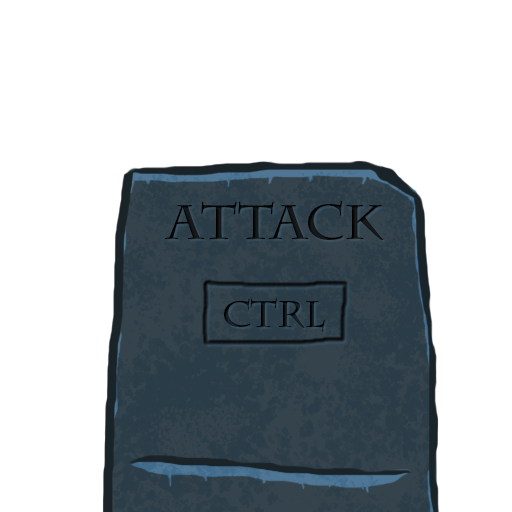
<style>
.page{position:relative;width:512px;height:512px;background:#ffffff}
.page>*{position:absolute;margin:0}
.t1{font:48px "CharlemagneStd-Bold";color:#161819}
.t2{font:36px "CharlemagneStd-Bold";color:#0c1013}
</style>
<div class="page">
<p class="t1" style="left:165px;top:200px;width:219px;height:41px">ATTACK</p>
<p class="t2" style="left:224px;top:298px;width:101px;height:34px">CTRL</p>
</div>
